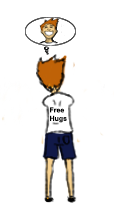
<style>
.page{position:relative;width:114px;height:204px;background:#ffffff}
.page>*{position:absolute;margin:0}
.t1{font:7px "Arial-BoldMT";color:#000000}
</style>
<div class="page">
<p class="t1" style="left:50px;top:107px;width:17px;height:16px">Free<br>Hugs</p>
</div>
